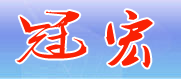
<style>
.page{position:relative;width:181px;height:79px}
.page>*{position:absolute;margin:0}
.t1{font:55px "Ò¶¸ùÓÑÐÐÊé·±";color:#f92104;scale:1.2 1}
</style>
<div class="page">
<p class="t1" style="left:16px;top:10px;width:137px;height:58px">冠 宏</p>
</div>
